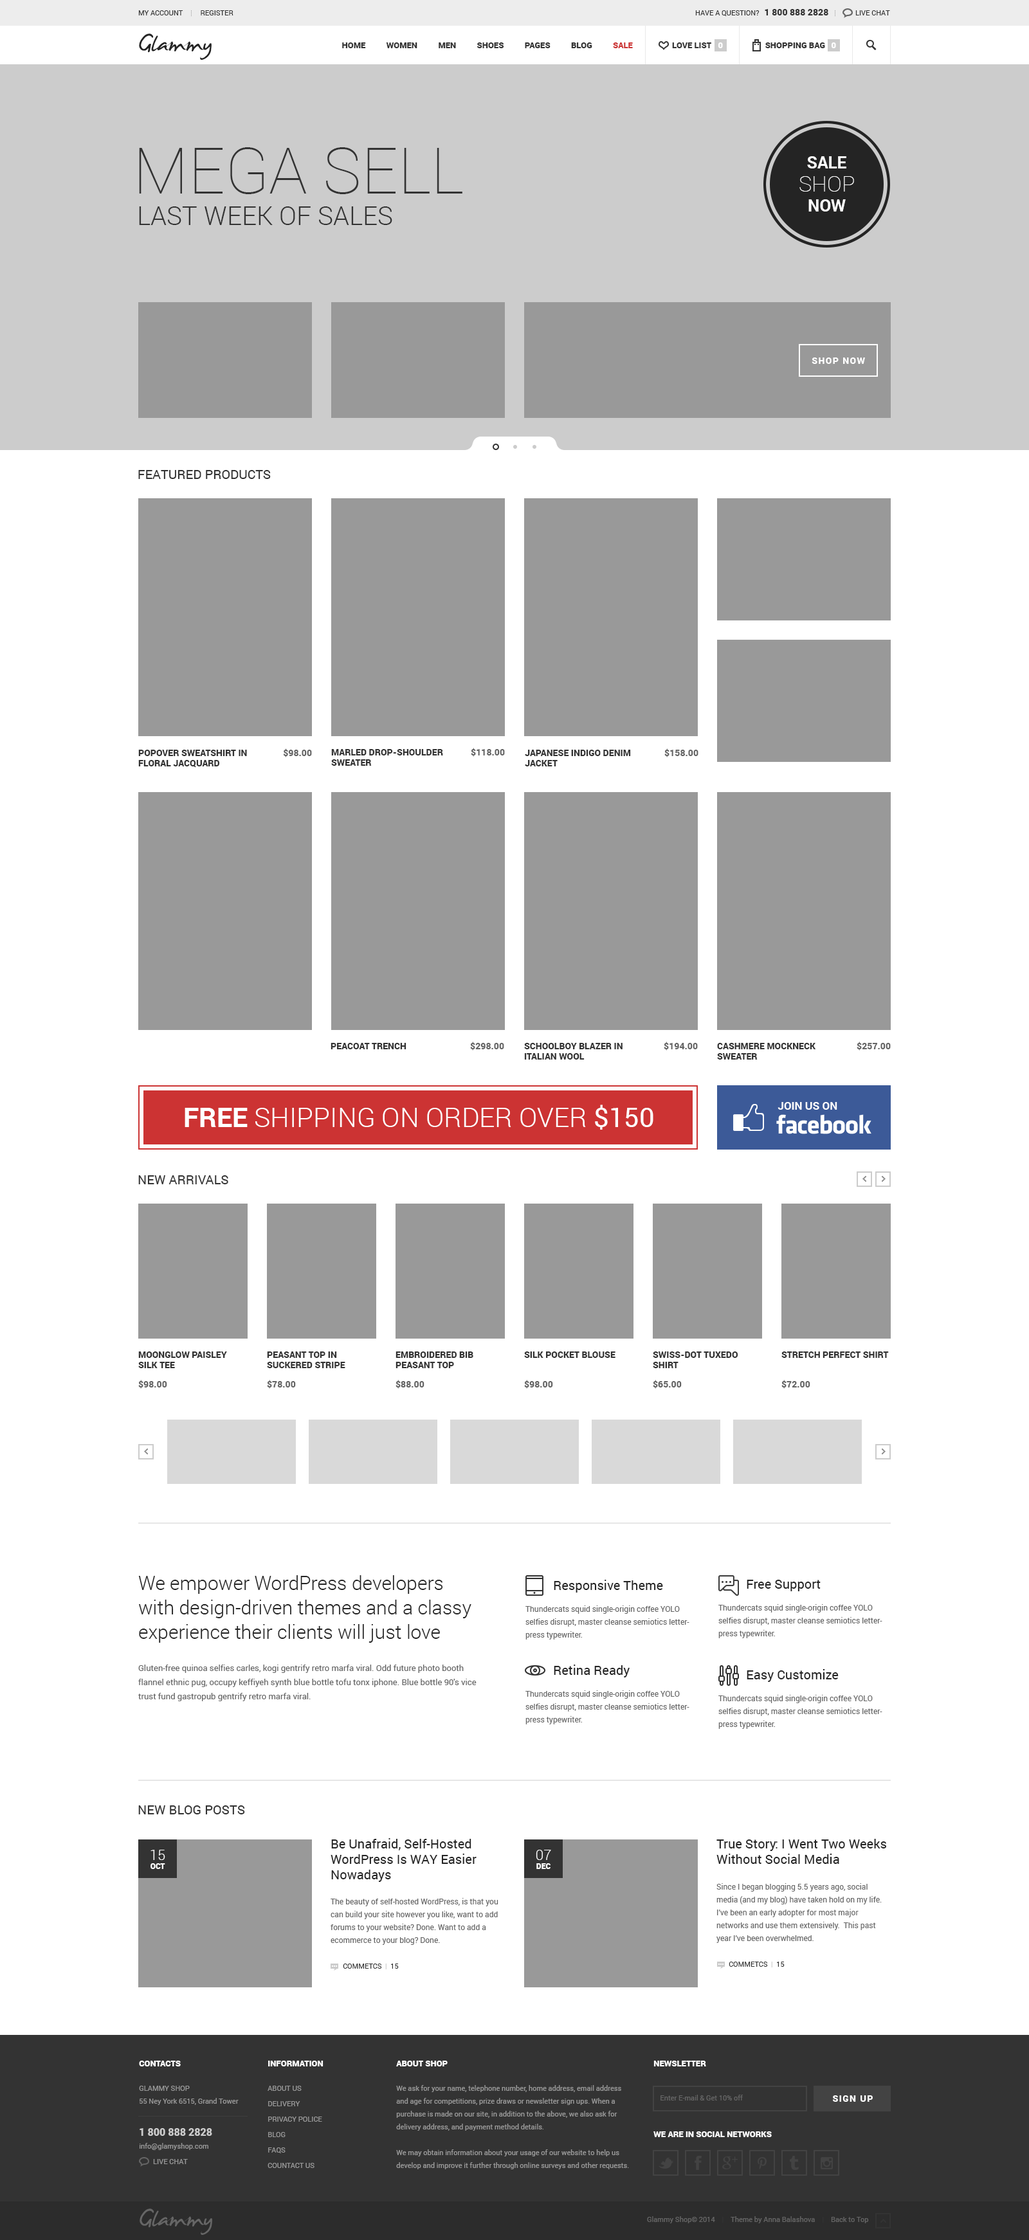
<style>
.page{position:relative;width:1029px;height:2240px;background:#ffffff}
.page>*{position:absolute;margin:0}
.t1{font:7.1px "Roboto-Regular";color:#333333;text-transform:uppercase}
.t2{font:9px "Roboto-Black";color:#333333;text-transform:uppercase}
.t3{font:38.6px "JamesFajardo";color:#242424}
.t4{font:8.4px "Roboto-Black";color:#333333;text-transform:uppercase}
.t5{font:8.4px "Roboto-Black";color:#cc3333;text-transform:uppercase}
.t6{font:8.4px "Roboto-Black";color:#ffffff;text-transform:uppercase}
.t7{font:64.3px "Roboto-Thin";color:#333333;text-transform:uppercase}
.t8{font:16.7px "Roboto-Bold";color:#ffffff;text-transform:uppercase}
.t9{font:21.9px/23.1px "Roboto-Thin";color:#ffffff;text-transform:uppercase}
.t10{font:25.7px "Roboto-Light";color:#333333;text-transform:uppercase}
.t11{font:9px "Roboto-Black";letter-spacing:0.1em;color:#ffffff;text-transform:uppercase}
.t12{font:12.9px "Roboto-Regular";color:#333333;text-transform:uppercase}
.t13{font:9px "Roboto-Black";color:#333333}
.t14{font:9px "Roboto-Black";color:#666666}
.t15{font:27px "Roboto-Light";color:#ffffff;text-transform:uppercase}
.t16{font:27px "Roboto-Bold";color:#ffffff;text-transform:uppercase}
.t17{font:27px "Roboto-Regular";color:#ffffff;text-transform:uppercase}
.t18{font:10.9px "Roboto-Bold";color:#ffffff;text-transform:uppercase}
.t19{font:19.3px/24.4px "Roboto-Light";color:#242424}
.t20{font:12.9px "Roboto-Regular";color:#242424}
.t21{font:7.7px/12.9px "Roboto-Regular";color:#666666}
.t22{font:8.4px/14.1px "Roboto-Regular";color:#666666}
.t23{font:7.7px "Roboto-Black";color:#ffffff;text-transform:uppercase}
.t24{font:14.1px "Roboto-Light";color:#ffffff}
.t25{font:7.1px/25.7px "Roboto-Regular";color:#333333;text-transform:uppercase}
.t26{font:7.1px/25.7px "Roboto-Regular";color:#cccccc;text-transform:uppercase}
.t27{font:7.1px/12.9px "Roboto-Regular";color:#999999}
.t28{font:7.1px/15.4px "Roboto-Regular";color:#999999;text-transform:uppercase}
.t29{font:10.3px/32.1px "Roboto-Black";color:#cccccc}
.t30{font:7.1px "Roboto-Regular";color:#666666}
.t31{font:7.1px "Roboto-Regular";color:#333333}
</style>
<div class="page">
<p class="t1" style="left:138px;top:10px;width:95px;height:5px">MY ACCOUNT          Register</p>
<p class="t1" style="left:695px;top:9px;width:133px;height:7px">HAVE A QUESTION?   <span class="t2">1 800 888 2828</span></p>
<p class="t1" style="left:855px;top:10px;width:35px;height:5px">Live chat</p>
<p class="t3" style="left:139px;top:33px;width:73px;height:27px">Glammy</p>
<p class="t4" style="left:342px;top:42px;width:291px;height:6px">Home          women          men          shoes          pages          Blog          <span class="t5">sale</span></p>
<p class="t4" style="left:672px;top:42px;width:39px;height:6px">Love list</p>
<p class="t6" style="left:717px;top:42px;width:6px;height:6px">0</p>
<p class="t4" style="left:765px;top:42px;width:60px;height:6px">shopping bag</p>
<p class="t6" style="left:831px;top:42px;width:5px;height:6px">0</p>
<p class="t7" style="left:139px;top:147px;width:323px;height:47px">MEGA SELL</p>
<p class="t8" style="left:799px;top:156px;width:55px;height:56px;text-align:center">SALE<br><span class="t9">SHOP<br></span>NOW</p>
<p class="t10" style="left:139px;top:206px;width:253px;height:19px">last week of sales</p>
<p class="t11" style="left:811px;top:357px;width:54px;height:7px">SHOP NOW</p>
<p class="t12" style="left:138px;top:470px;width:133px;height:9px">FEATURED PRODUCTS</p>
<p class="t13" style="left:138px;top:750px;width:109px;height:18px">POPOVER SWEATSHIRT IN FLORAL JACQUARD</p>
<p class="t14" style="left:283px;top:748px;width:29px;height:9px">$98.00</p>
<p class="t13" style="left:331px;top:749px;width:112px;height:17px">MARLED DROP-SHOULDER SWEATER</p>
<p class="t14" style="left:471px;top:748px;width:34px;height:9px">$118.00</p>
<p class="t13" style="left:525px;top:750px;width:106px;height:16px">JAPANESE INDIGO DENIM JACKET</p>
<p class="t14" style="left:664px;top:748px;width:34px;height:9px">$158.00</p>
<p class="t13" style="left:330px;top:1043px;width:76px;height:6px">PEACOAT TRENCH</p>
<p class="t14" style="left:470px;top:1041px;width:34px;height:9px">$298.00</p>
<p class="t13" style="left:524px;top:1043px;width:98px;height:16px">SCHOOLBOY BLAZER IN ITALIAN WOOL</p>
<p class="t14" style="left:663px;top:1041px;width:35px;height:9px">$194.00</p>
<p class="t13" style="left:717px;top:1043px;width:99px;height:16px">CASHMERE MOCKNECK SWEATER</p>
<p class="t14" style="left:856px;top:1041px;width:34px;height:9px">$257.00</p>
<p class="t15" style="left:184px;top:1104px;width:469px;height:26px"><span class="t16">Free</span> shiPping on order over <span class="t17">$150</span></p>
<p class="t18" style="left:777px;top:1102px;width:60px;height:8px">join us on</p>
<p class="t12" style="left:138px;top:1175px;width:90px;height:9px">new arrivals</p>
<p class="t13" style="left:138px;top:1351px;width:89px;height:17px">MOONGLOW PAISLEY SILK TEE</p>
<p class="t13" style="left:267px;top:1351px;width:78px;height:17px">PEASANT TOP IN SUCKERED STRIPE</p>
<p class="t13" style="left:395px;top:1351px;width:78px;height:17px">EMBROIDERED BIB PEASANT TOP</p>
<p class="t13" style="left:524px;top:1351px;width:91px;height:7px">SILK POCKET BLOUSE</p>
<p class="t13" style="left:652px;top:1351px;width:85px;height:17px">SWISS-DOT TUXEDO SHIRT</p>
<p class="t13" style="left:781px;top:1351px;width:107px;height:7px">STRETCH PERFECT SHIRT</p>
<p class="t14" style="left:138px;top:1380px;width:29px;height:9px">$98.00</p>
<p class="t14" style="left:267px;top:1380px;width:29px;height:9px">$78.00</p>
<p class="t14" style="left:395px;top:1380px;width:29px;height:9px">$88.00</p>
<p class="t14" style="left:524px;top:1380px;width:29px;height:9px">$98.00</p>
<p class="t14" style="left:652px;top:1380px;width:29px;height:9px">$65.00</p>
<p class="t14" style="left:781px;top:1380px;width:29px;height:9px">$72.00</p>
<p class="t19" style="left:138px;top:1575px;width:333px;height:68px">We empower WordPress developers with design-driven themes and a classy experience their clients will just love</p>
<p class="t20" style="left:554px;top:1580px;width:109px;height:12px">Responsive Theme</p>
<p class="t20" style="left:746px;top:1580px;width:74px;height:11px">Free Support</p>
<p class="t21" style="left:525px;top:1605px;width:164px;height:34px">Thundercats squid single-origin coffee YOLO selfies disrupt, master cleanse semiotics letterpress typewriter.</p>
<p class="t21" style="left:718px;top:1604px;width:164px;height:34px">Thundercats squid single-origin coffee YOLO selfies disrupt, master cleanse semiotics letterpress typewriter.</p>
<p class="t22" style="left:138px;top:1664px;width:338px;height:37px">Gluten-free quinoa selfies carles, kogi gentrify retro marfa viral. Odd future photo booth flannel ethnic pug, occupy keffiyeh synth blue bottle tofu tonx iphone. Blue bottle 90′s vice trust fund gastropub gentrify retro marfa viral.</p>
<p class="t20" style="left:554px;top:1664px;width:75px;height:13px">Retina Ready</p>
<p class="t20" style="left:746px;top:1669px;width:92px;height:13px">Easy Customize</p>
<p class="t21" style="left:525px;top:1690px;width:164px;height:34px">Thundercats squid single-origin coffee YOLO selfies disrupt, master cleanse semiotics letterpress typewriter.</p>
<p class="t21" style="left:718px;top:1695px;width:164px;height:34px">Thundercats squid single-origin coffee YOLO selfies disrupt, master cleanse semiotics letterpress typewriter.</p>
<p class="t12" style="left:138px;top:1805px;width:107px;height:9px">NEW BLOG POSTS</p>
<p class="t20" style="left:330px;top:1838px;width:146px;height:44px">Be Unafraid, Self-Hosted WordPress Is WAY Easier Nowadays</p>
<p class="t20" style="left:716px;top:1839px;width:170px;height:25px">True Story: I Went Two Weeks Without Social Media</p>
<p class="t23" style="left:150px;top:1850px;width:15px;height:19px;text-align:center"><span class="t24">15<br></span>oct</p>
<p class="t23" style="left:536px;top:1850px;width:15px;height:19px;text-align:center"><span class="t24">07<br></span>dec</p>
<p class="t21" style="left:716px;top:1883px;width:165px;height:84px">Since I began blogging 5.5 years ago, social media (and my blog) have taken hold on my life. I’ve been an early adopter for most major networks and use them extensively.  This past year I’ve been overwhelmed.<br><span class="t25">       Commetcs</span><span class="t26">  |  </span><span class="t25">15</span></p>
<p class="t21" style="left:330px;top:1898px;width:168px;height:71px">The beauty of self-hosted WordPress, is that you can build your site however you like, want to add forums to your website? Done. Want to add a ecommerce to your blog? Done.<br><span class="t25">       Commetcs</span><span class="t26">  |  </span><span class="t25">15</span></p>
<p class="t6" style="left:139px;top:2060px;width:42px;height:6px">Contacts</p>
<p class="t6" style="left:268px;top:2060px;width:55px;height:6px">Information</p>
<p class="t6" style="left:396px;top:2060px;width:51px;height:6px">About shop</p>
<p class="t6" style="left:653px;top:2060px;width:53px;height:6px">NEWSLETTER</p>
<p class="t27" style="left:139px;top:2085px;width:100px;height:79px"><span class="t28">Glammy Shop<br></span>55 Ney York 6515, Grand Tower<br><span class="t29">1 800 888 2828<br></span>info@glamyshop.com<br><span class="t28">        Live chat</span></p>
<p class="t28" style="left:267px;top:2085px;width:55px;height:83px">About us<br>Delivery<br>Privacy police<br>Blog<br>Faqs<br>countact us</p>
<p class="t27" style="left:396px;top:2085px;width:233px;height:84px">We ask for your name, telephone number, home address, email address and age for competitions, prize draws or newsletter sign ups. When a purchase is made on our site, in addition to the above, we also ask for delivery address, and payment method details. <br><br>We may obtain information about your usage of our website to help us develop and improve it further through online surveys and other requests.</p>
<p class="t30" style="left:660px;top:2094px;width:82px;height:6px">Enter E-mail &amp; Get 10% off</p>
<p class="t11" style="left:833px;top:2095px;width:39px;height:7px">SIGN UP</p>
<p class="t6" style="left:653px;top:2131px;width:118px;height:6px">we are in social networks</p>
<p class="t30" style="left:647px;top:2216px;width:222px;height:7px">Glammy Shop© 2014<span class="t31">    |    </span>Theme by Anna Balashova<span class="t31">    |    </span>Back to Top</p>
</div>
